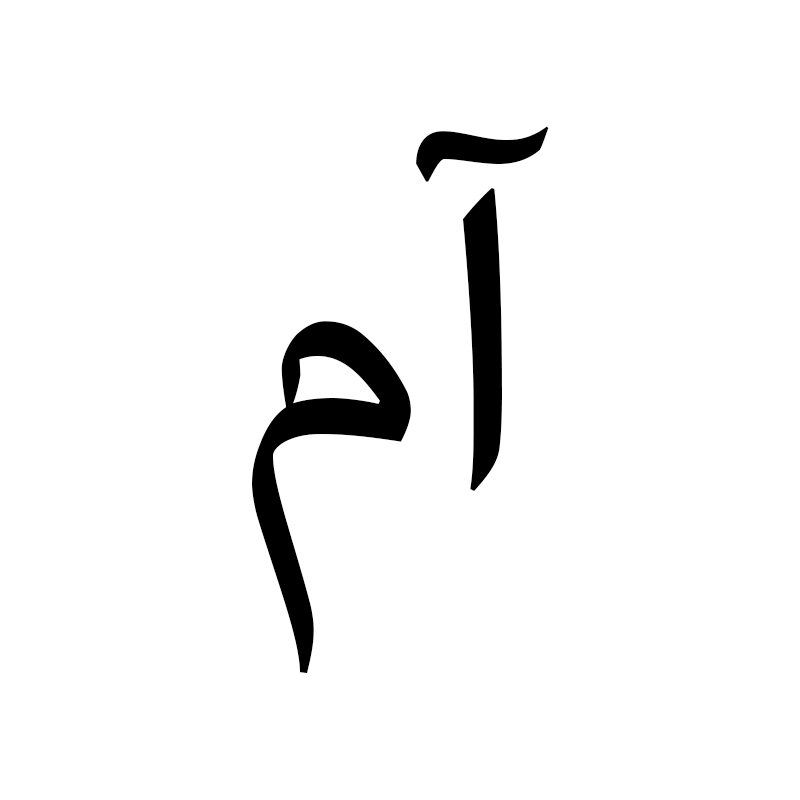
<style>
.page{position:relative;width:800px;height:800px;background:#ffffff}
.page>*{position:absolute;margin:0}
.t1{font:600px "AdobeArabic-Regular";color:#000000}
</style>
<div class="page">
<p class="t1" style="left:252px;top:126px;width:297px;height:548px">آم</p>
</div>
